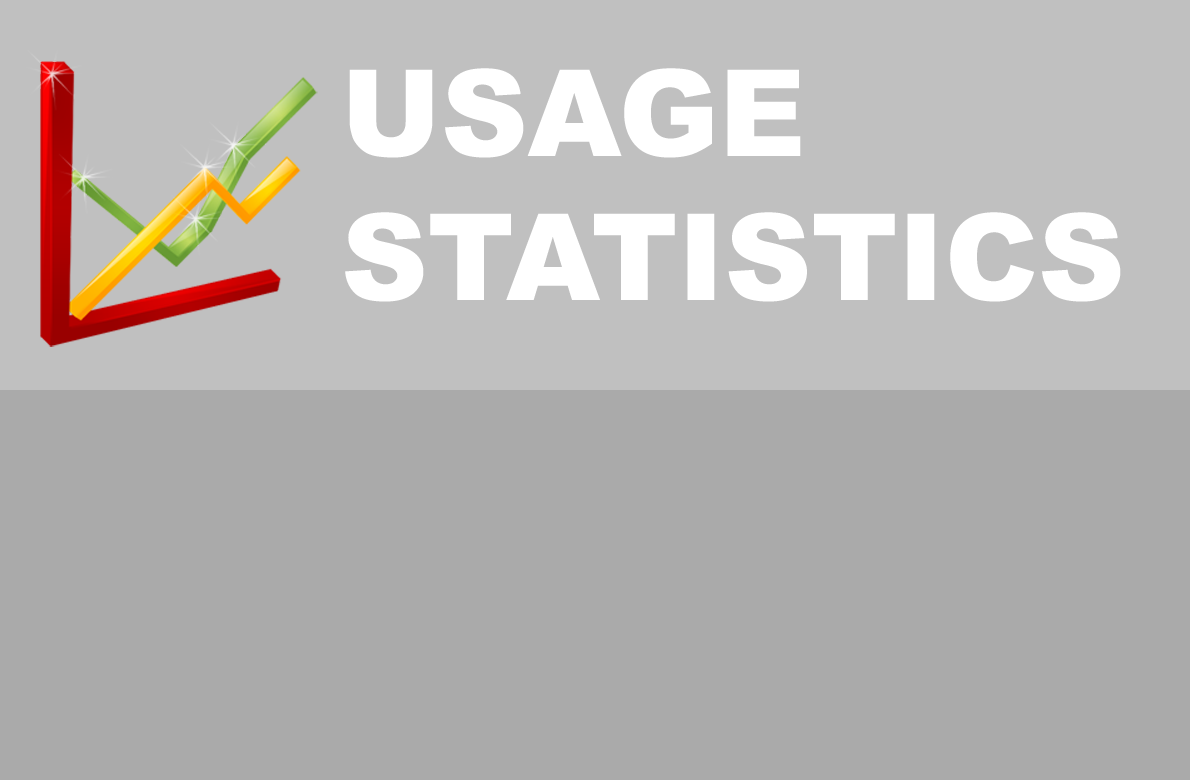
<style>
.page{position:relative;width:1190px;height:780px;background:#aaaaaa}
.page>*{position:absolute;margin:0}
.t1{font:120px "Arial-Black";color:#ffffff}
</style>
<div class="page">
<p class="t1" style="left:345px;top:68px;width:776px;height:234px">USAGE<br>STATISTICS</p>
</div>
